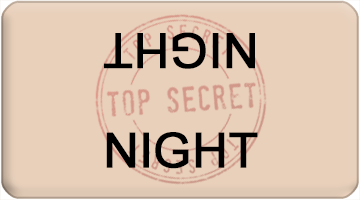
<style>
.page{position:relative;width:360px;height:200px;background:#e8d0bb}
.page>*{position:absolute;margin:0}
.t1{font:48px "ArialMT";color:#000000;font-weight:bold}
</style>
<div class="page">
<p class="t1" style="left:104px;top:32px;width:151px;height:37px;rotate:180deg">NIGHT</p>
<p class="t1" style="left:106px;top:132px;width:152px;height:37px">NIGHT</p>
</div>
